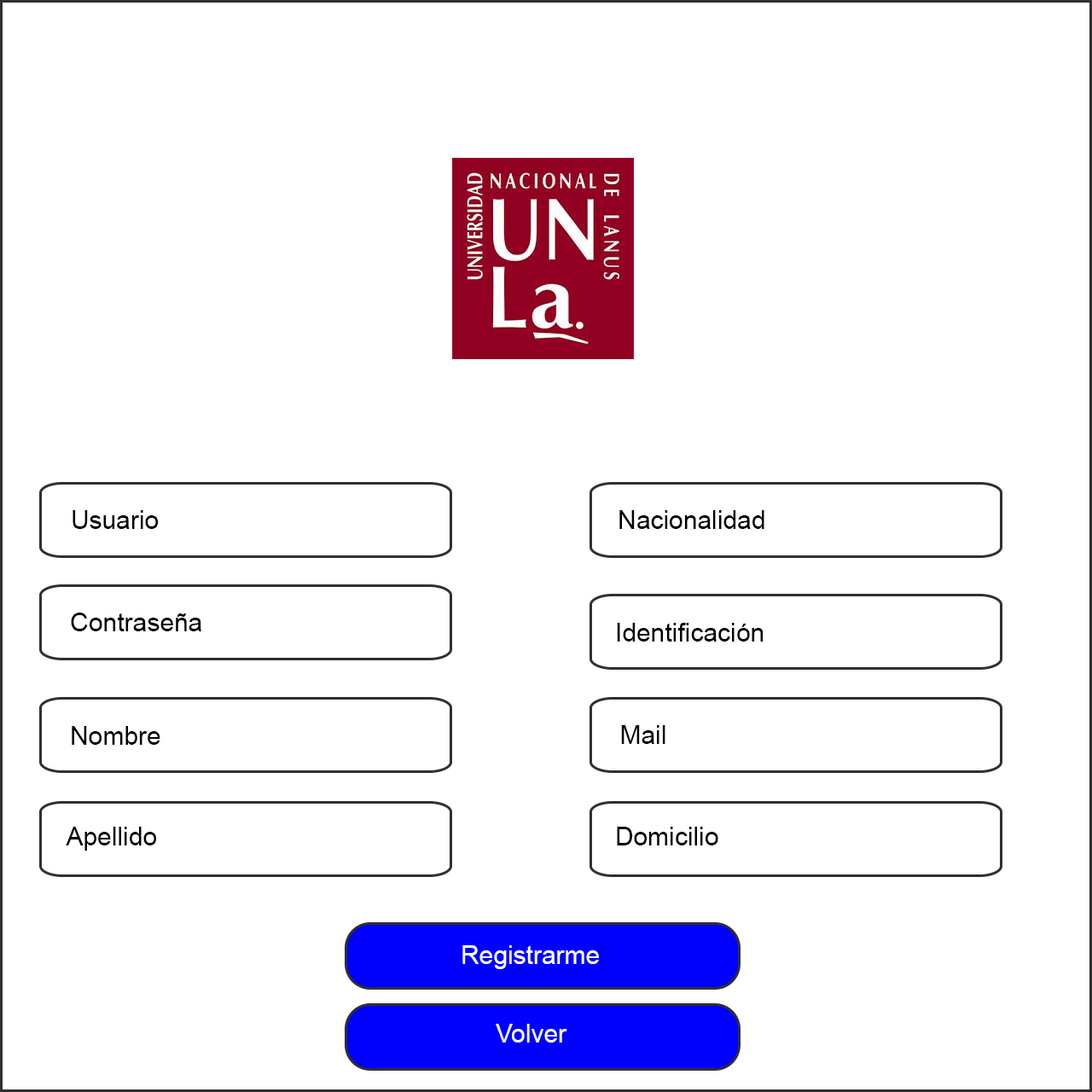
<style>
.page{position:relative;width:1092px;height:1092px;background:#ffffff}
.page>*{position:absolute;margin:0}
.t1{font:25.6px "ArialMT";color:#000000}
.t2{font:25.6px "ArialMT";color:#ffffff}
</style>
<div class="page">
<p class="t1" style="left:73px;top:510px;width:86px;height:19px">Usuario</p>
<p class="t1" style="left:619px;top:510px;width:145px;height:19px">Nacionalidad</p>
<p class="t1" style="left:71px;top:613px;width:130px;height:18px">Contraseña</p>
<p class="t1" style="left:617px;top:623px;width:147px;height:19px">Identificación</p>
<p class="t1" style="left:72px;top:726px;width:88px;height:19px">Nombre</p>
<p class="t1" style="left:621px;top:725px;width:44px;height:19px">Mail</p>
<p class="t1" style="left:66px;top:827px;width:91px;height:24px">Apellido</p>
<p class="t1" style="left:617px;top:827px;width:101px;height:18px">Domicilio</p>
<p class="t2" style="left:462px;top:945px;width:137px;height:24px">Registrarme</p>
<p class="t2" style="left:496px;top:1024px;width:71px;height:19px">Volver</p>
</div>
